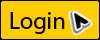
<style>
.page{position:relative;width:100px;height:40px;background:#ffcc00}
.page>*{position:absolute;margin:0}
.t1{font:24px "MyriadPro-Regular";color:#000000}
</style>
<div class="page">
<p class="t1" style="left:10px;top:12px;width:55px;height:22px">Login</p>
</div>
